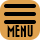
<style>
.page{position:relative;width:40px;height:40px;background:#dfa14e}
.page>*{position:absolute;margin:0}
.t1{font:12px "Bazar";color:#000000}
</style>
<div class="page">
<p class="t1" style="left:7px;top:25px;width:19px;height:12px">MEN</p>
<p class="t1" style="left:27px;top:25px;width:6px;height:12px">U</p>
</div>
